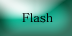
<style>
.page{position:relative;width:72px;height:36px}
.page>*{position:absolute;margin:0}
.t1{font:12px "Batang";color:#000000}
</style>
<div class="page">
<p class="t1" style="left:22px;top:13px;width:31px;height:10px">Flash</p>
</div>
